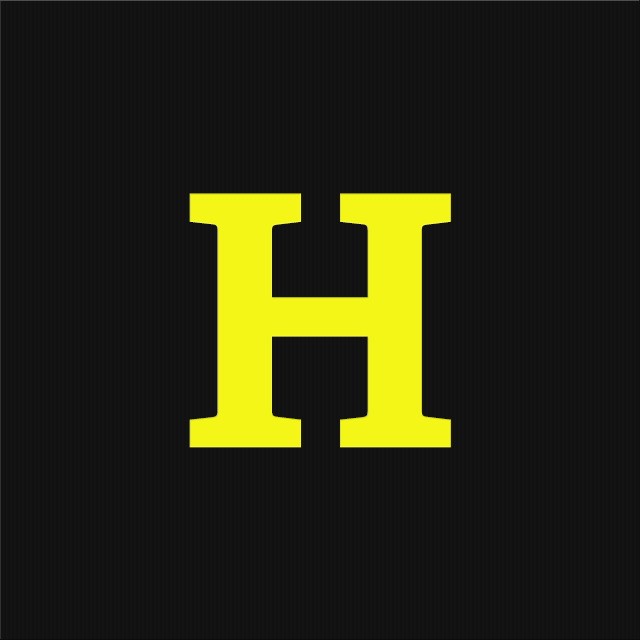
<style>
.page{position:relative;width:640px;height:640px;background:#131313}
.page>*{position:absolute;margin:0}
.t1{font:350px "AdelleBasic-Bold";letter-spacing:0.02em;color:#f3f617}
</style>
<div class="page">
<p class="t1" style="left:189px;top:193px;width:262px;height:255px">H</p>
</div>
